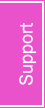
<style>
.page{position:relative;width:45px;height:108px;background:#ea52cc}
.page>*{position:absolute;margin:0}
.t1{font:18px "ArialMT";color:#ffffff}
</style>
<div class="page">
<p class="t1" style="left:19px;top:23px;width:18px;height:62px;rotate:-90deg">Support</p>
</div>
